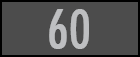
<style>
.page{position:relative;width:140px;height:57px;background:#4c4c4c}
.page>*{position:absolute;margin:0}
.t1{font:53.3px "FuturaCondensed";color:#bebfc1}
</style>
<div class="page">
<p class="t1" style="left:49px;top:9px;width:40px;height:40px">60</p>
</div>
